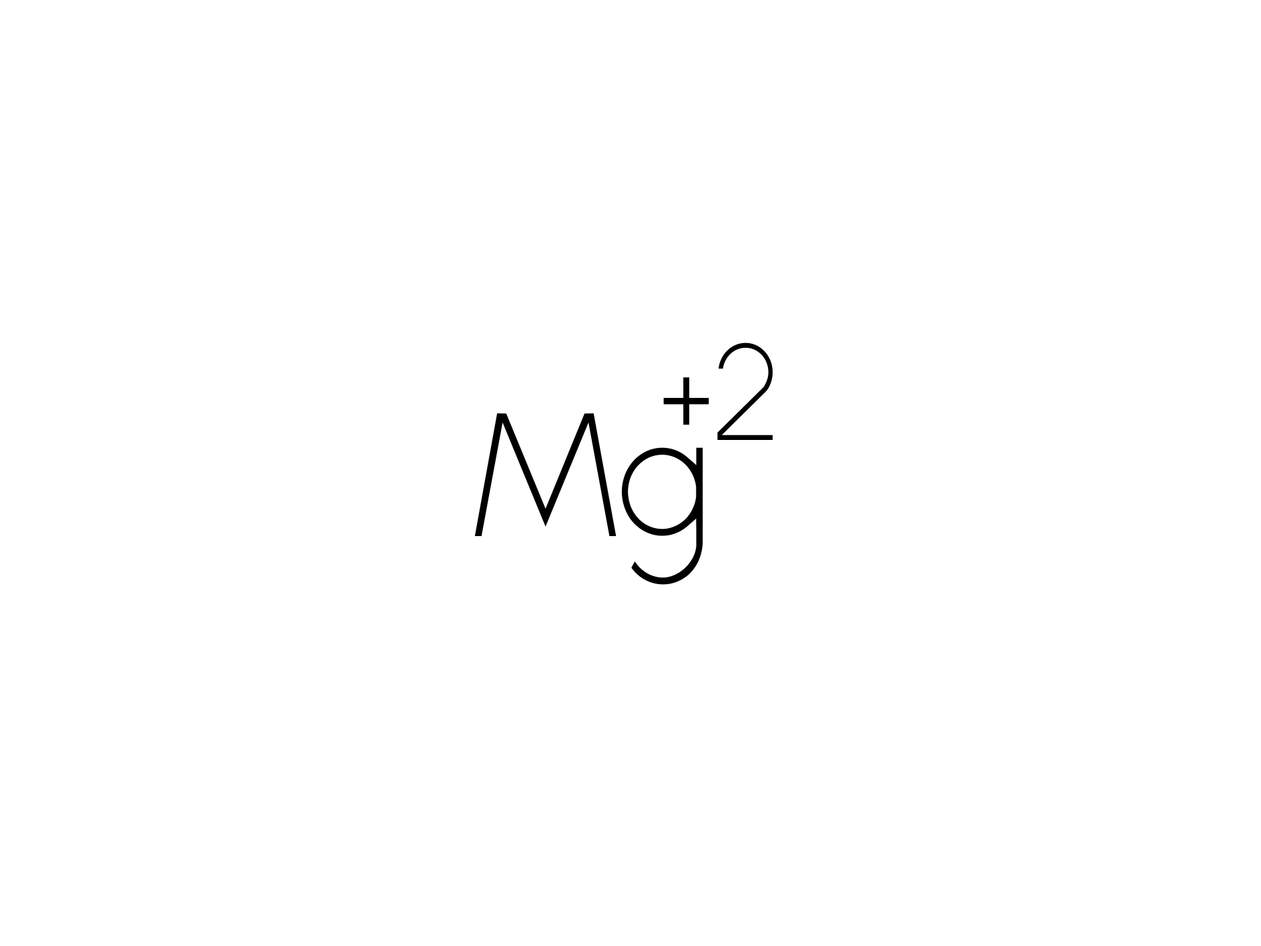
<style>
.page{position:relative;width:1261px;height:946px;background:#ffffff}
.page>*{position:absolute;margin:0}
.t1{font:138.9px "Alcubierre";color:#000000;scale:0.95 1}
.t2{font:162.1px "Alcubierre";color:#000000;scale:0.95 1}
.t3{font:173.6px "Alcubierre";color:#000000;scale:0.95 1}
</style>
<div class="page">
<p class="t1" style="left:717px;top:342px;width:56px;height:98px">2</p>
<p class="t2" style="left:663px;top:377px;width:46px;height:48px">+</p>
<p class="t3" style="left:474px;top:413px;width:229px;height:172px">Mg</p>
</div>
